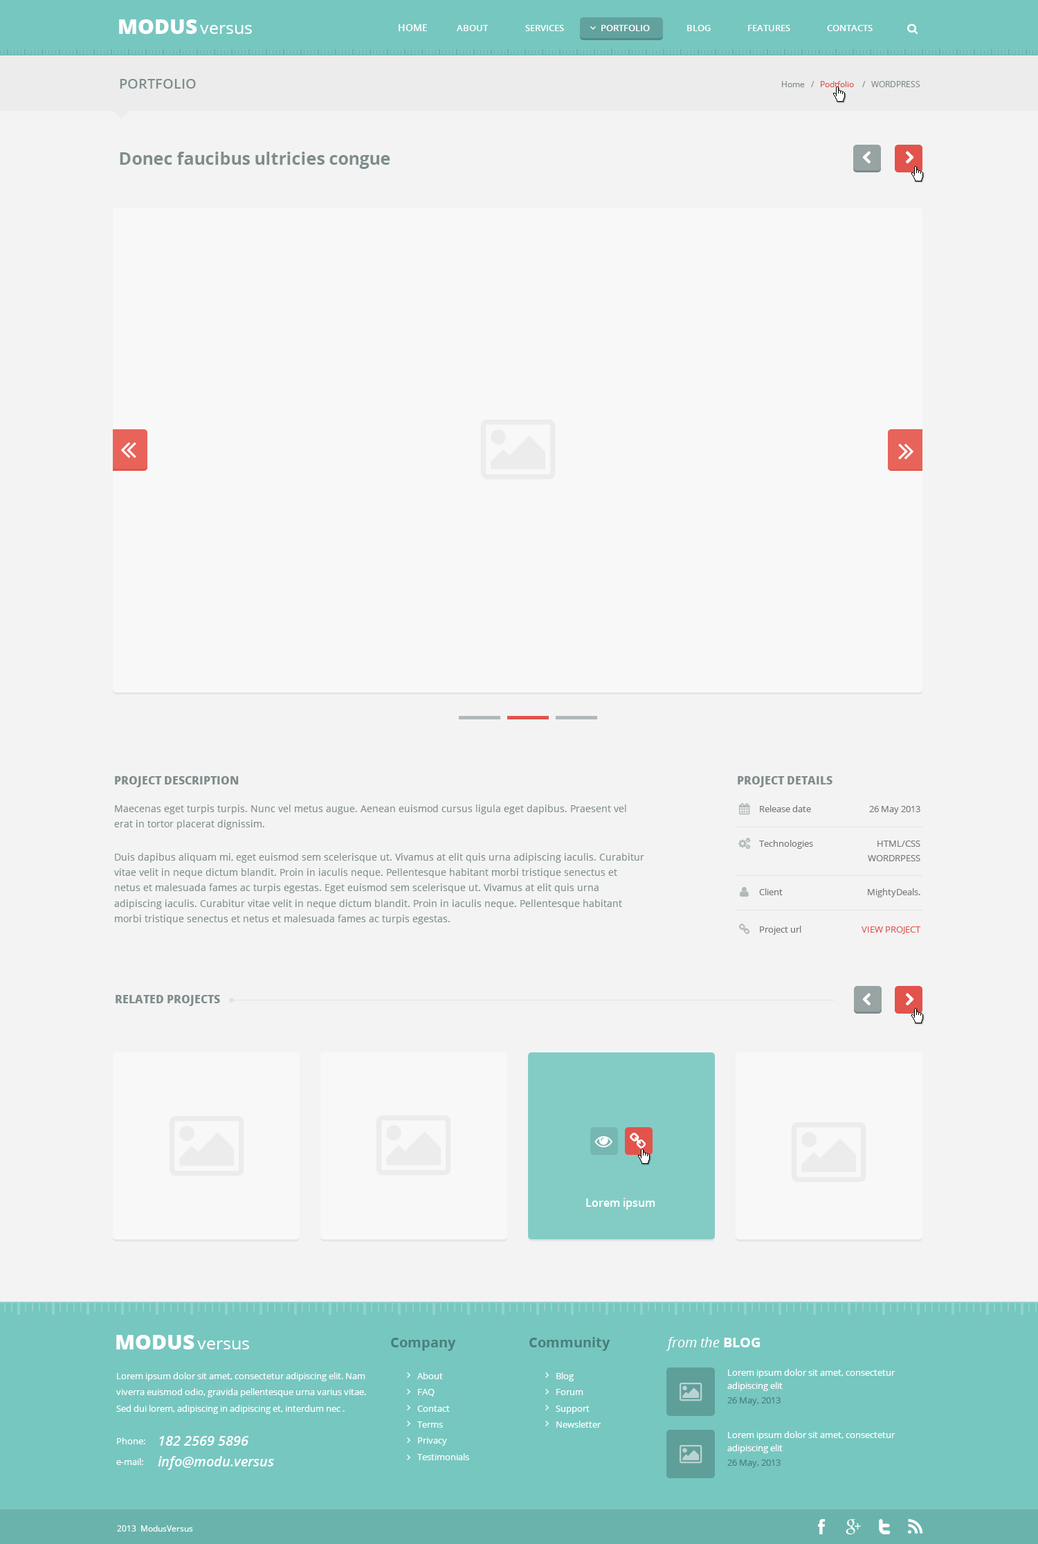
<style>
.page{position:relative;width:1038px;height:1544px;background:#f3f3f3}
.page>*{position:absolute;margin:0}
.t1{font:20.8px "OpenSans-Extrabold";color:#ffffff}
.t2{font:17.3px "OpenSans";color:#ffffff}
.t3{font:9.7px "OpenSans-Semibold";color:#ffffff}
.t4{font:9px "OpenSans-Semibold";color:#ffffff}
.t5{font:13.8px "OpenSans-Semibold";color:#7f8c8c}
.t6{font:8.3px "OpenSans";color:#7f8c8c}
.t7{font:8.3px "OpenSans";color:#e1524b}
.t8{font:17.3px "OpenSans-Bold";color:#7f8c8c}
.t9{font:11.1px "OpenSans-Extrabold";color:#7f8c8c}
.t10{font:9.7px/15.5px "OpenSans";color:#7f8c8c}
.t11{font:9px "OpenSans";color:#777777}
.t12{font:9px/14.4px "OpenSans";color:#777777}
.t13{font:9px "OpenSans";color:#e2534b}
.t14{font:11.1px "OpenSans-Semibold";color:#ffffff}
.t15{font:13.8px "OpenSans-Bold";color:#497e79}
.t16{font:13.8px "OpenSans-Italic";color:#ffffff}
.t17{font:13.8px "OpenSans-Bold";color:#ffffff}
.t18{font:9px/16.2px "OpenSans";color:#ffffff}
.t19{font:9px/13.5px "OpenSans";color:#ffffff}
.t20{font:9px "OpenSans";color:#497e79}
.t21{font:9px "OpenSans";color:#ffffff}
.t22{font:13.8px "OpenSans-SemiboldItalic";color:#ffffff}
.t23{font:8.3px "OpenSans";color:#ffffff}
</style>
<div class="page">
<p class="t1" style="left:119px;top:19px;width:78px;height:15px">MODUS</p>
<p class="t2" style="left:200px;top:25px;width:52px;height:9px">versus</p>
<p class="t3" style="left:399px;top:24px;width:29px;height:7px">HOME</p>
<p class="t4" style="left:457px;top:25px;width:32px;height:6px">ABOUT</p>
<p class="t4" style="left:525px;top:25px;width:39px;height:6px">SERVICES</p>
<p class="t4" style="left:602px;top:25px;width:48px;height:6px">PORTFOLIO</p>
<p class="t4" style="left:687px;top:25px;width:24px;height:6px">BLOG</p>
<p class="t4" style="left:748px;top:25px;width:43px;height:6px">FEATURES</p>
<p class="t4" style="left:827px;top:25px;width:46px;height:6px">CONTACTS</p>
<p class="t5" style="left:120px;top:79px;width:76px;height:10px">PORTFOLIO</p>
<p class="t6" style="left:782px;top:81px;width:139px;height:6px">Home   /   <span class="t7">Podtfolio    </span>/   WORDPRESS</p>
<p class="t8" style="left:120px;top:152px;width:270px;height:17px">Donec faucibus ultricies congue</p>
<p class="t9" style="left:115px;top:776px;width:124px;height:11px">PROJECT DESCRIPTION</p>
<p class="t9" style="left:738px;top:776px;width:95px;height:11px">PROJECT DETAILS</p>
<p class="t10" style="left:114px;top:804px;width:513px;height:25px">Maecenas eget turpis turpis. Nunc vel metus augue. Aenean euismod cursus ligula eget dapibus. Praesent vel erat in tortor placerat dignissim.</p>
<p class="t11" style="left:760px;top:805px;width:51px;height:7px">Release date</p>
<p class="t11" style="left:870px;top:806px;width:51px;height:8px">26 May 2013</p>
<p class="t11" style="left:759px;top:840px;width:54px;height:9px">Technologies</p>
<p class="t12" style="left:868px;top:840px;width:53px;height:21px;text-align:right">HTML/CSS<br>WORDRPESS</p>
<p class="t10" style="left:114px;top:853px;width:531px;height:71px">Duis dapibus aliquam mi, eget euismod sem scelerisque ut. Vivamus at elit quis urna adipiscing iaculis. Curabitur vitae velit in neque dictum blandit. Proin in iaculis neque. Pellentesque habitant morbi tristique senectus et netus et malesuada fames ac turpis egestas. Eget euismod sem scelerisque ut. Vivamus at elit quis urna adipiscing iaculis. Curabitur vitae velit in neque dictum blandit. Proin in iaculis neque. Pellentesque habitant morbi tristique senectus et netus et malesuada fames ac turpis egestas.</p>
<p class="t11" style="left:759px;top:888px;width:24px;height:7px">Client</p>
<p class="t11" style="left:868px;top:888px;width:53px;height:9px">MightyDeals.</p>
<p class="t11" style="left:760px;top:926px;width:42px;height:9px">Project url</p>
<p class="t13" style="left:862px;top:926px;width:59px;height:8px">VIEW PROJECT</p>
<p class="t9" style="left:116px;top:995px;width:104px;height:11px">RELATED PROJECTS</p>
<p class="t14" style="left:586px;top:1198px;width:70px;height:11px">Lorem ipsum</p>
<p class="t1" style="left:116px;top:1335px;width:79px;height:14px">MODUS</p>
<p class="t15" style="left:391px;top:1338px;width:65px;height:13px">Company</p>
<p class="t15" style="left:530px;top:1337px;width:81px;height:14px">Community</p>
<p class="t16" style="left:666px;top:1337px;width:94px;height:14px">from the <span class="t17">BLOG</span></p>
<p class="t2" style="left:197px;top:1340px;width:52px;height:9px">versus</p>
<p class="t18" style="left:116px;top:1372px;width:250px;height:42px">Lorem ipsum dolor sit amet, consectetur adipiscing elit. Nam viverra euismod odio, gravida pellentesque urna varius vitae. Sed dui lorem, adipiscing in adipiscing et, interdum nec .</p>
<p class="t18" style="left:417px;top:1372px;width:52px;height:88px">About<br>FAQ<br>Contact<br>Terms<br>Privacy<br>Testimonials</p>
<p class="t18" style="left:556px;top:1372px;width:46px;height:56px">Blog<br>Forum<br>Support<br>Newsletter</p>
<p class="t19" style="left:728px;top:1369px;width:168px;height:22px">Lorem ipsum dolor sit amet, consectetur adipiscing elit</p>
<p class="t20" style="left:728px;top:1397px;width:53px;height:8px">26 May, 2013</p>
<p class="t19" style="left:728px;top:1431px;width:168px;height:22px">Lorem ipsum dolor sit amet, consectetur adipiscing elit</p>
<p class="t21" style="left:117px;top:1437px;width:28px;height:7px">Phone:</p>
<p class="t22" style="left:159px;top:1436px;width:90px;height:10px">182 2569 5896</p>
<p class="t22" style="left:158px;top:1456px;width:116px;height:14px">info@modu.versus</p>
<p class="t21" style="left:116px;top:1458px;width:27px;height:7px">e-mail:</p>
<p class="t20" style="left:728px;top:1459px;width:53px;height:9px">26 May, 2013</p>
<p class="t23" style="left:117px;top:1525px;width:76px;height:6px">2013  ModusVersus</p>
</div>
